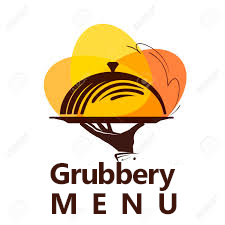
<style>
.page{position:relative;width:225px;height:225px;background:#ffffff}
.page>*{position:absolute;margin:0}
.t1{font:29.7px/29px "SegoeUI-Bold";letter-spacing:-0.04em;color:#3f140b}
.t2{font:29.7px/29px "SegoeUI-Bold";letter-spacing:0.08em;color:#3f140b}
</style>
<div class="page">
<p class="t1" style="left:50px;top:162px;width:127px;height:53px">Grubbery<br><span class="t2">M E N U</span></p>
</div>
